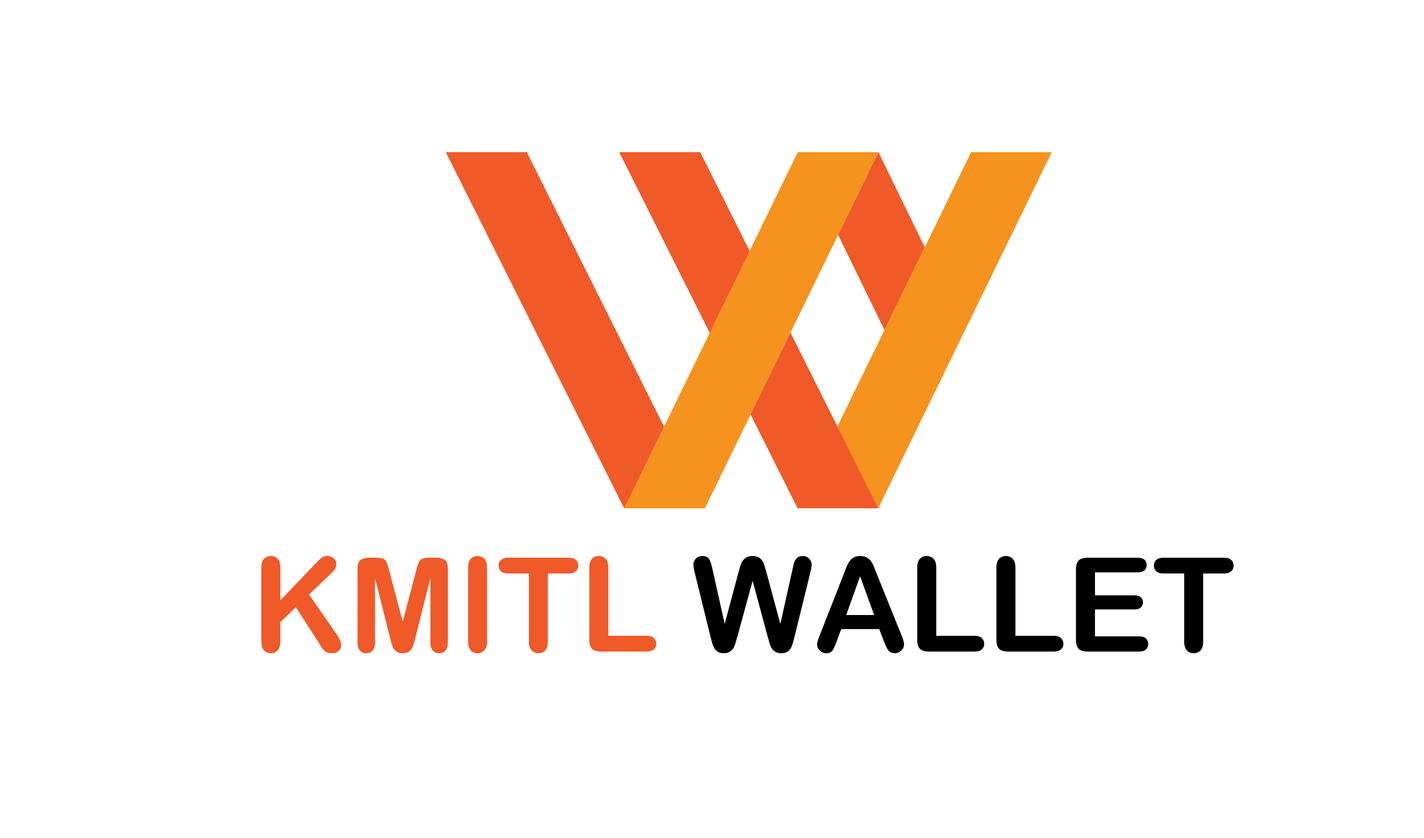
<style>
.page{position:relative;width:1424px;height:838px;background:#ffffff}
.page>*{position:absolute;margin:0}
.t1{font:130.6px "ArialRoundedMTBold";color:#000000}
.t2{font:130.6px "ArialRoundedMTBold";color:#ef5a28}
</style>
<div class="page">
<p class="t1" style="left:261px;top:556px;width:972px;height:97px"><span class="t2">KMITL </span>WALLET</p>
</div>
